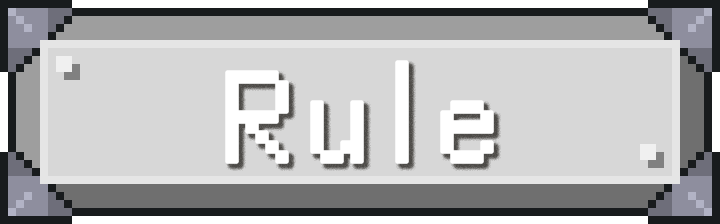
<style>
.page{position:relative;width:720px;height:224px;background:#d7d7d7}
.page>*{position:absolute;margin:0}
.t1{font:120px "Cubic_11";letter-spacing:0.1em;color:#ffffff;font-weight:bold}
</style>
<div class="page">
<p class="t1" style="left:225px;top:60px;width:269px;height:104px">Rule</p>
</div>
